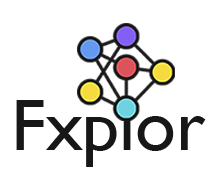
<style>
.page{position:relative;width:218px;height:189px;background:#ffffff}
.page>*{position:absolute;margin:0}
.t1{font:73px "GillSansMT";color:#171717}
</style>
<div class="page">
<p class="t1" style="left:16px;top:100px;width:190px;height:67px">Fxplor</p>
</div>
